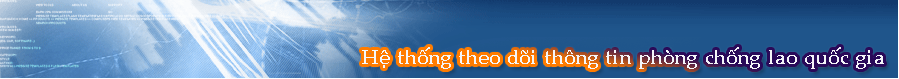
<style>
.page{position:relative;width:899px;height:79px}
.page>*{position:absolute;margin:0}
.t1{font:20px "VNI-Palatin-Bold";color:#f9f9f9}
</style>
<div class="page">
<p class="t1" style="left:362px;top:47px;width:522px;height:22px">Heä thoáng theo doõi thoâng tin phoøng choáng lao quoác gia</p>
</div>
